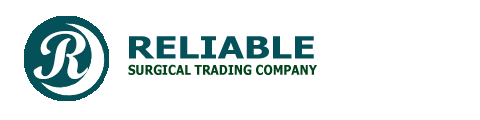
<style>
.page{position:relative;width:480px;height:120px;background:#ffffff}
.page>*{position:absolute;margin:0}
.t1{font:68px "ScriptMTBold";color:#ffffff}
.t2{font:30.8px "Tahoma-Bold";color:#05515a;scale:1.24 1}
.t3{font:13.5px "Tahoma-Bold";color:#02451a;scale:0.89 1}
</style>
<div class="page">
<p class="t1" style="left:33px;top:31px;width:55px;height:48px">R</p>
<p class="t2" style="left:129px;top:36px;width:185px;height:23px">RELIABLE</p>
<p class="t3" style="left:128px;top:64px;width:189px;height:11px">SURGICAL TRADING COMPANY</p>
</div>
